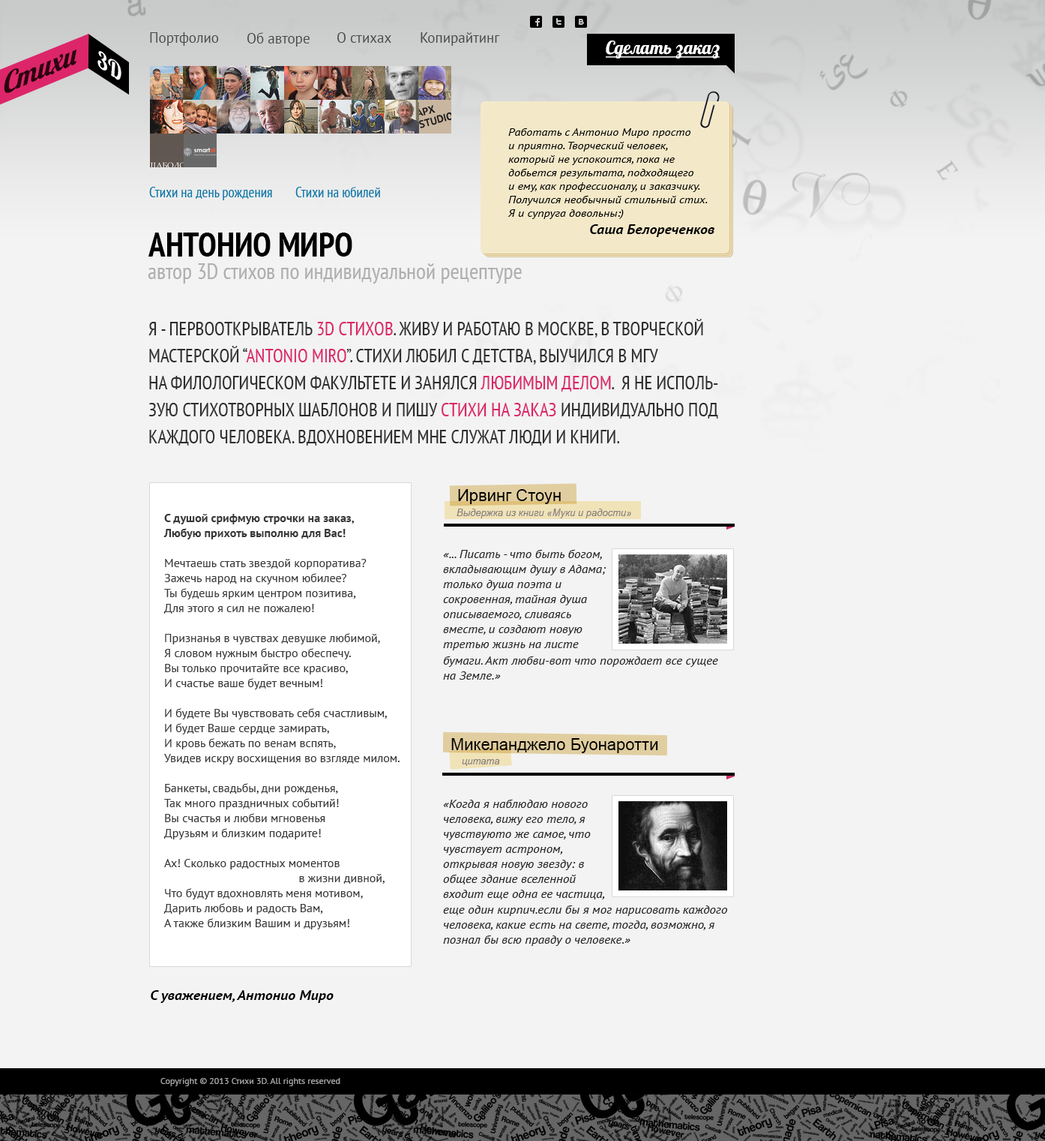
<style>
.page{position:relative;width:1045px;height:1141px;background:#f3f3f3}
.page>*{position:absolute;margin:0}
.t1{font:10.8px/13.5px "PTSans-Italic";color:#000000;scale:1.11 1}
.t2{font:33.7px "PTSans-NarrowBold";color:#000000;text-transform:uppercase}
.t3{font:13.5px "PTSans-BoldItalic";color:#000000;scale:1.11 1}
.t4{font:22.5px "PTSans-Narrow";color:#afafaf}
.t5{font:18.7px/27px "PTSans-Narrow";color:#2d2d2d;text-transform:uppercase}
.t6{font:18.7px/27px "PTSans-Narrow";color:#dc2669;text-transform:uppercase}
.t7{font:16.5px "ArialMT";color:#000000}
.t8{font:9.7px "Arial-ItalicMT";color:#867e7e}
.t9{font:12px/15px "PTSans-Regular";color:#373737}
.t10{font:12px/15px "PTSans-Bold";color:#373737}
.t11{font:11.5px/15px "PTSans-Italic";color:#272727;scale:1.11 1}
.t12{font:9px "PTSans-Regular";color:#a3a3a3}
</style>
<div class="page">
<p class="t1" style="left:508px;top:127px;width:200px;height:92px">Работать с Антонио Миро просто <br>и приятно. Творческий человек, который не успокоится, пока не добьется результата, подходящего<br>и ему, как профессионалу, и заказчику. Получился необычный стильный стих. <br>Я и супруга довольны:)</p>
<p class="t2" style="left:148px;top:232px;width:204px;height:24px">Антонио Миро</p>
<p class="t3" style="left:590px;top:224px;width:125px;height:13px">Саша Белореченков</p>
<p class="t4" style="left:148px;top:263px;width:374px;height:20px">автор 3D стихов по индивидуальной рецептуре</p>
<p class="t5" style="left:148px;top:319px;width:570px;height:126px">Я - первооткрыватель <span class="t6">3D стихов</span>. Живу и работаю в москве, в творческой мастерской “<span class="t6">antonio miro</span>”. Стихи любил с детства, выучился в мгу <br>на филологическом факультете и занялся <span class="t6">любимым делом</span>.  Я не исполь-<br>зую стихотворных шаблонов и пишу <span class="t6">стихи на заказ </span>индивидуально под каждого человека. вдохновением мне служат люди и книги.</p>
<p class="t7" style="left:458px;top:489px;width:103px;height:15px">Ирвинг Стоун</p>
<p class="t8" style="left:457px;top:508px;width:174px;height:10px">Выдержка из книги «Муки и радости»</p>
<p class="t9" style="left:163px;top:514px;width:237px;height:415px"><span class="t10">С душой срифмую строчки на заказ,<br>Любую прихоть выполню для Вас!<br></span><br>Мечтаешь стать звездой корпоратива?<br>Зажечь народ на скучном юбилее?<br>Ты будешь ярким центром позитива,<br>Для этого я сил не пожалею!<br><br>Признанья в чувствах девушке любимой,<br>Я словом нужным быстро обеспечу.<br>Вы только прочитайте все красиво,<br>И счастье ваше будет вечным! <br><br>И будете Вы чувствовать себя счастливым,<br>И будет Ваше сердце замирать,<br>И кровь бежать по венам вспять,<br>Увидев искру восхищения во взгляде милом.   <br>                                                       <br>Банкеты, свадьбы, дни рожденья,<br>Так много праздничных событий!<br>Вы счастья и любви мгновенья<br>Друзьям и близким подарите!<br><br>Ах! Сколько радостных моментов <br>                                          в жизни дивной,<br>Что будут вдохновлять меня мотивом,<br>Дарить любовь и радость Вам,<br>А также близким Вашим и друзьям!</p>
<p class="t11" style="left:443px;top:549px;width:164px;height:101px">«... Писать - что быть богом, вкладывающим душу в Адама; только душа поэта и сокровенная, тайная душа описываемого, сливаясь вместе, и создают новую третью жизнь на листе бумаги.</p>
<p class="t11" style="left:443px;top:655px;width:275px;height:24px">бумаги. Акт любви-вот что порождает все сущее на Земле.»</p>
<p class="t7" style="left:451px;top:738px;width:207px;height:15px">Микеланджело Буонаротти</p>
<p class="t8" style="left:462px;top:759px;width:38px;height:7px">цитата</p>
<p class="t11" style="left:443px;top:799px;width:162px;height:100px">«Когда я наблюдаю нового человека, вижу его тело, я чувствуюто же самое, что чувствует астроном, открывая новую звезду: в общее здание вселенной входит еще одна ее частица,</p>
<p class="t11" style="left:443px;top:904px;width:285px;height:42px">еще один кирпич.если бы я мог нарисовать каждого человека, какие есть на свете, тогда, возможно, я познал бы всю правду о человеке.»</p>
<p class="t3" style="left:151px;top:990px;width:183px;height:13px">С уважением, Антонио Миро</p>
<p class="t12" style="left:160px;top:1078px;width:180px;height:8px">Copyright © 2013 Стихи 3D. All rights reserved</p>
</div>
